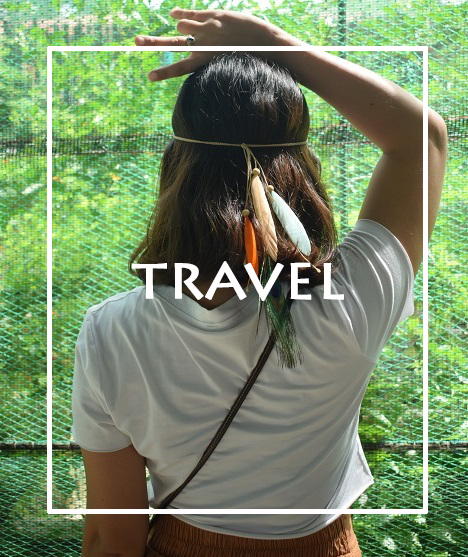
<style>
.page{position:relative;width:468px;height:557px}
.page>*{position:absolute;margin:0}
.t1{font:58.3px "LithosPro-Regular";color:#fffdfd;font-weight:bold}
</style>
<div class="page">
<p class="t1" style="left:131px;top:261px;width:213px;height:40px">travel</p>
</div>
